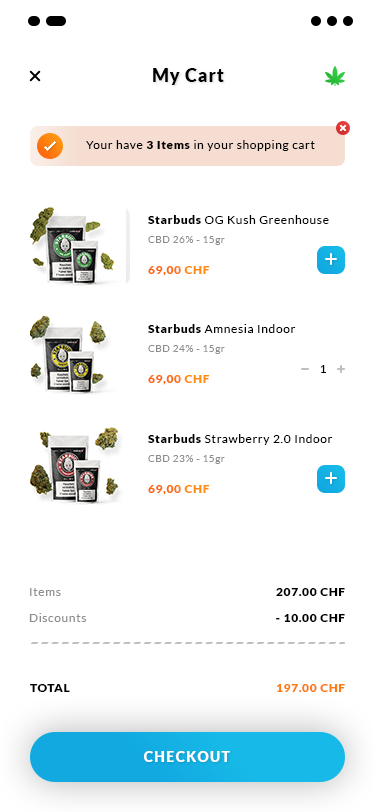
<style>
.page{position:relative;width:375px;height:812px;background:#ffffff}
.page>*{position:absolute;margin:0}
.t1{font:18px "Lato-Black";letter-spacing:0.05em;color:#000000}
.t2{font:12px "Lato-Regular";letter-spacing:0.05em;color:#000000}
.t3{font:12px "Lato-Black";letter-spacing:0.05em;color:#000000}
.t4{font:10px "Lato-Regular";letter-spacing:0.05em;color:#8d8d8d}
.t5{font:12px "Lato-Black";letter-spacing:0.05em;color:#ff7a0f}
.t6{font:12px "Lato-Regular";letter-spacing:0.1em;color:#000000;text-transform:uppercase}
.t7{font:12px/26px "Lato-Regular";letter-spacing:0.05em;color:#8d8d8d}
.t8{font:12px/26px "Lato-Black";letter-spacing:0.05em;color:#000000}
.t9{font:14px "Lato-Black";letter-spacing:0.1em;color:#ffffff}
</style>
<div class="page">
<p class="t1" style="left:153px;top:68px;width:71px;height:17px">My Cart</p>
<p class="t2" style="left:86px;top:140px;width:229px;height:11px">Your have <span class="t3">3 Items</span> in your shopping cart</p>
<p class="t2" style="left:148px;top:215px;width:181px;height:9px"><span class="t3">Starbuds</span> OG Kush Greenhouse</p>
<p class="t4" style="left:148px;top:236px;width:77px;height:9px">CBD 26% - 15gr</p>
<p class="t5" style="left:148px;top:266px;width:62px;height:10px">69,00 CHF</p>
<p class="t2" style="left:148px;top:324px;width:148px;height:9px"><span class="t3">Starbuds </span>Amnesia Indoor</p>
<p class="t4" style="left:148px;top:345px;width:77px;height:9px">CBD 24% - 15gr</p>
<p class="t6" style="left:320px;top:365px;width:6px;height:8px">1</p>
<p class="t5" style="left:148px;top:375px;width:62px;height:10px">69,00 CHF</p>
<p class="t2" style="left:148px;top:434px;width:185px;height:11px"><span class="t3">Starbuds</span> Strawberry 2.0 Indoor</p>
<p class="t4" style="left:148px;top:455px;width:77px;height:9px">CBD 23% - 15gr</p>
<p class="t5" style="left:148px;top:485px;width:62px;height:10px">69,00 CHF</p>
<p class="t7" style="left:29px;top:588px;width:58px;height:34px">Items<br>Discounts</p>
<p class="t8" style="left:276px;top:588px;width:69px;height:34px;text-align:right">207.00 CHF<br>- 10.00 CHF</p>
<p class="t3" style="left:30px;top:684px;width:40px;height:8px">TOTAL</p>
<p class="t5" style="left:277px;top:684px;width:68px;height:8px">197.00 CHF</p>
<p class="t9" style="left:143px;top:751px;width:87px;height:11px">CHECKOUT</p>
</div>
